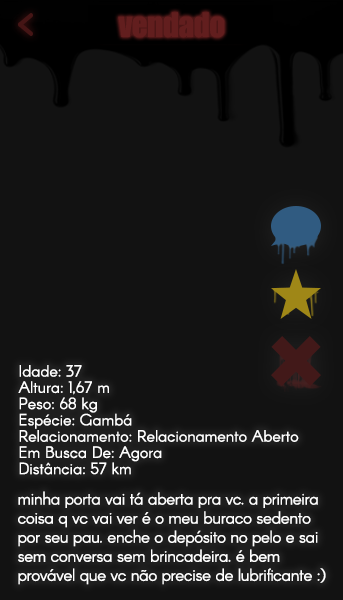
<style>
.page{position:relative;width:343px;height:600px;background:#121212}
.page>*{position:absolute;margin:0}
.t1{font:31px "Impact";letter-spacing:-0.015em;color:#621e1e}
.t2{font:16px "Arcon-Regular";color:#ffffff}
.t3{font:17px/22px "Arcon-Regular";letter-spacing:-0.024em;color:#ffffff}
</style>
<div class="page">
<p class="t1" style="left:118px;top:12px;width:107px;height:26px">vendado</p>
<p class="t2" style="left:18px;top:365px;width:281px;height:110px">Idade: 37<br>Altura: 1,67 m<br>Peso: 68 kg<br>Espécie: Gambá<br>Relacionamento: Relacionamento Aberto<br>Em Busca De: Agora<br>Distância: 57 km</p>
<p class="t3" style="left:18px;top:491px;width:308px;height:94px">minha porta vai tá aberta pra vc. a primeira<br>coisa q vc vai ver é o meu buraco sedento<br>por seu pau. enche o depósito no pelo e sai<br>sem conversa sem brincadeira. é bem<br>provável que vc não precise de lubrificante :)</p>
</div>
